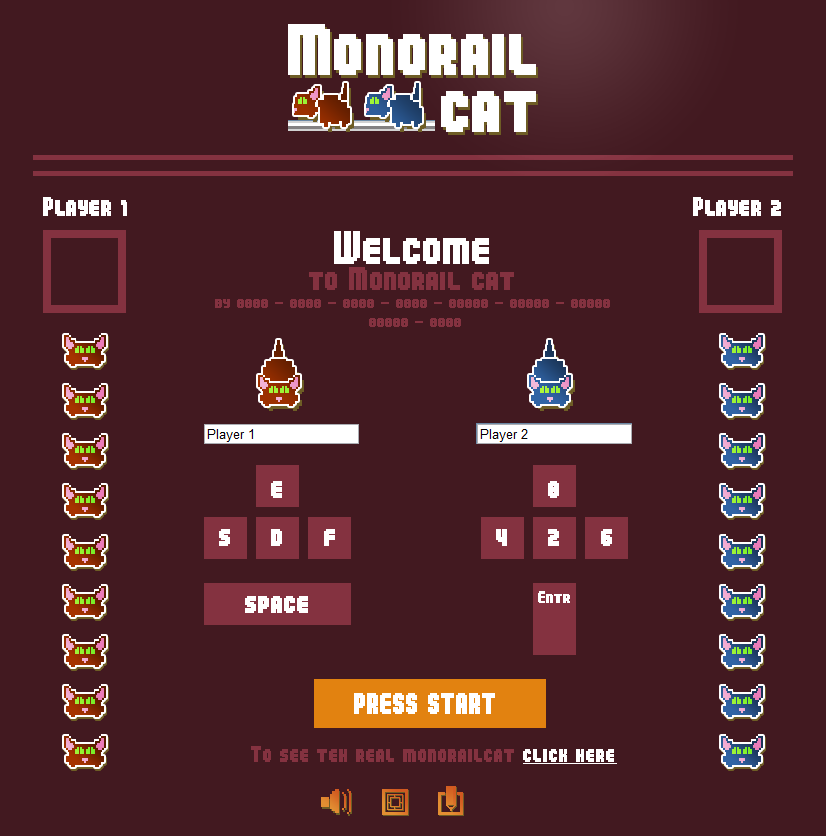
<style>
.page{position:relative;width:826px;height:836px;background:#421920}
.page>*{position:absolute;margin:0}
.t1{font:22px "04b25";color:#ffffff;font-weight:bold}
.t2{font:14px/19px "04b25";color:#843240;font-weight:bold}
.t3{font:38px/68px "04b25";color:#ffffff;font-weight:bold}
.t4{font:26px/26px "04b25";color:#843240;font-weight:bold}
.t5{font:24px "04b25";color:#ffffff;font-weight:bold}
.t6{font:14px "04b25";color:#ffffff;font-weight:bold}
.t7{font:18px "04b25";color:#843240;font-weight:bold}
.t8{font:18px "04b25";color:#ffffff;font-weight:bold;text-decoration:underline}
</style>
<div class="page">
<p class="t1" style="left:43px;top:197px;width:84px;height:19px">Player 1</p>
<p class="t1" style="left:693px;top:197px;width:88px;height:19px">Player 2</p>
<p class="t2" style="left:215px;top:231px;width:395px;height:96px;text-align:center"><span class="t3">Welcome<br></span><span class="t4">to Monorail cat<br></span>by 8888 - 8888 - 8888 - 8888 - 88888 - 88888 - 88888<br> 88888 - 8888</p>
<p class="t5" style="left:271px;top:481px;width:11px;height:17px">e</p>
<p class="t5" style="left:548px;top:481px;width:11px;height:17px">8</p>
<p class="t5" style="left:219px;top:529px;width:11px;height:17px">s</p>
<p class="t5" style="left:271px;top:529px;width:11px;height:17px">d</p>
<p class="t5" style="left:324px;top:529px;width:11px;height:17px">f</p>
<p class="t5" style="left:496px;top:529px;width:11px;height:17px">4</p>
<p class="t5" style="left:548px;top:529px;width:11px;height:17px">2</p>
<p class="t5" style="left:601px;top:529px;width:11px;height:17px">6</p>
<p class="t6" style="left:538px;top:591px;width:32px;height:12px">Entr</p>
<p class="t5" style="left:245px;top:596px;width:63px;height:17px">space</p>
<p class="t5" style="left:354px;top:693px;width:141px;height:21px">PRESS START</p>
<p class="t7" style="left:251px;top:746px;width:366px;height:18px">To see teh real monorailcat <span class="t8">click here</span></p>
</div>
